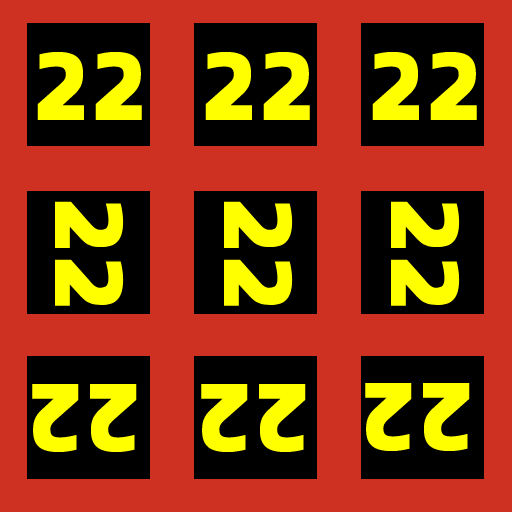
<style>
.page{position:relative;width:512px;height:512px;background:#ce3122}
.page>*{position:absolute;margin:0}
.t1{font:130px "Share-BoldOSF";color:#ffff00}
</style>
<div class="page">
<p class="t1" style="left:37px;top:51px;width:105px;height:69px">22</p>
<p class="t1" style="left:205px;top:51px;width:105px;height:69px">22</p>
<p class="t1" style="left:372px;top:51px;width:105px;height:69px">22</p>
<p class="t1" style="left:55px;top:201px;width:69px;height:105px;rotate:90deg">22</p>
<p class="t1" style="left:224px;top:201px;width:69px;height:105px;rotate:90deg">22</p>
<p class="t1" style="left:391px;top:201px;width:69px;height:105px;rotate:90deg">22</p>
<p class="t1" style="left:32px;top:383px;width:105px;height:70px;rotate:-180deg">22</p>
<p class="t1" style="left:201px;top:383px;width:105px;height:70px;rotate:-180deg">22</p>
<p class="t1" style="left:365px;top:382px;width:105px;height:70px;rotate:-180deg">22</p>
</div>
